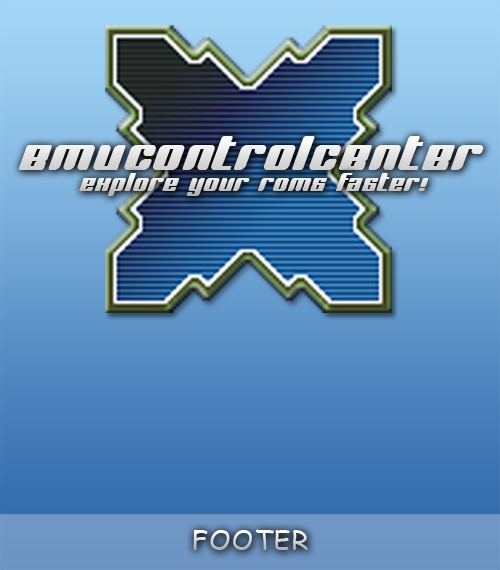
<style>
.page{position:relative;width:500px;height:570px}
.page>*{position:absolute;margin:0}
.t1{font:47px "BNJinx";letter-spacing:0.05em;color:#e2e1e1}
.t2{font:24px "BNJinx";letter-spacing:0.05em}
.t3{font:26.6px "ComicSansMS";letter-spacing:0.05em}
</style>
<div class="page">
<p class="t1" style="left:18px;top:136px;width:466px;height:34px">emucontrolcenter</p>
<p class="t2" style="left:79px;top:173px;width:350px;height:23px">explore your roms faster!</p>
<p class="t3" style="left:193px;top:529px;width:115px;height:21px">FOOTER</p>
</div>
